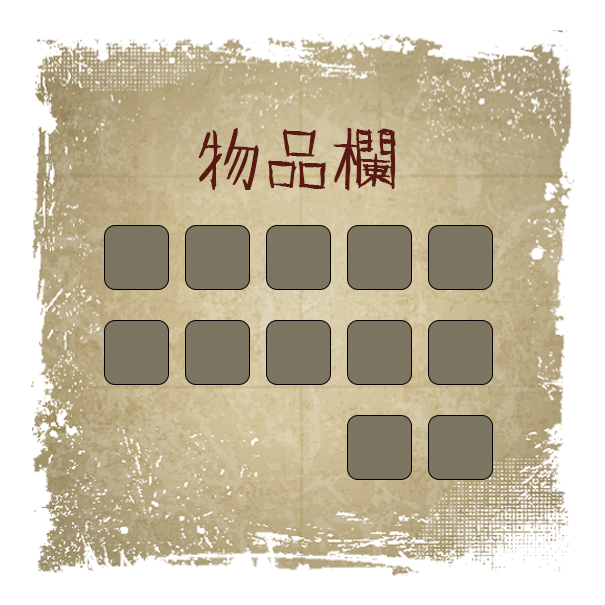
<style>
.page{position:relative;width:605px;height:605px;background:#ffffff}
.page>*{position:absolute;margin:0}
.t1{font:62.5px "onryou";letter-spacing:0.04em;color:#591811;font-weight:bold}
</style>
<div class="page">
<p class="t1" style="left:198px;top:128px;width:198px;height:63px">物品欄</p>
</div>
